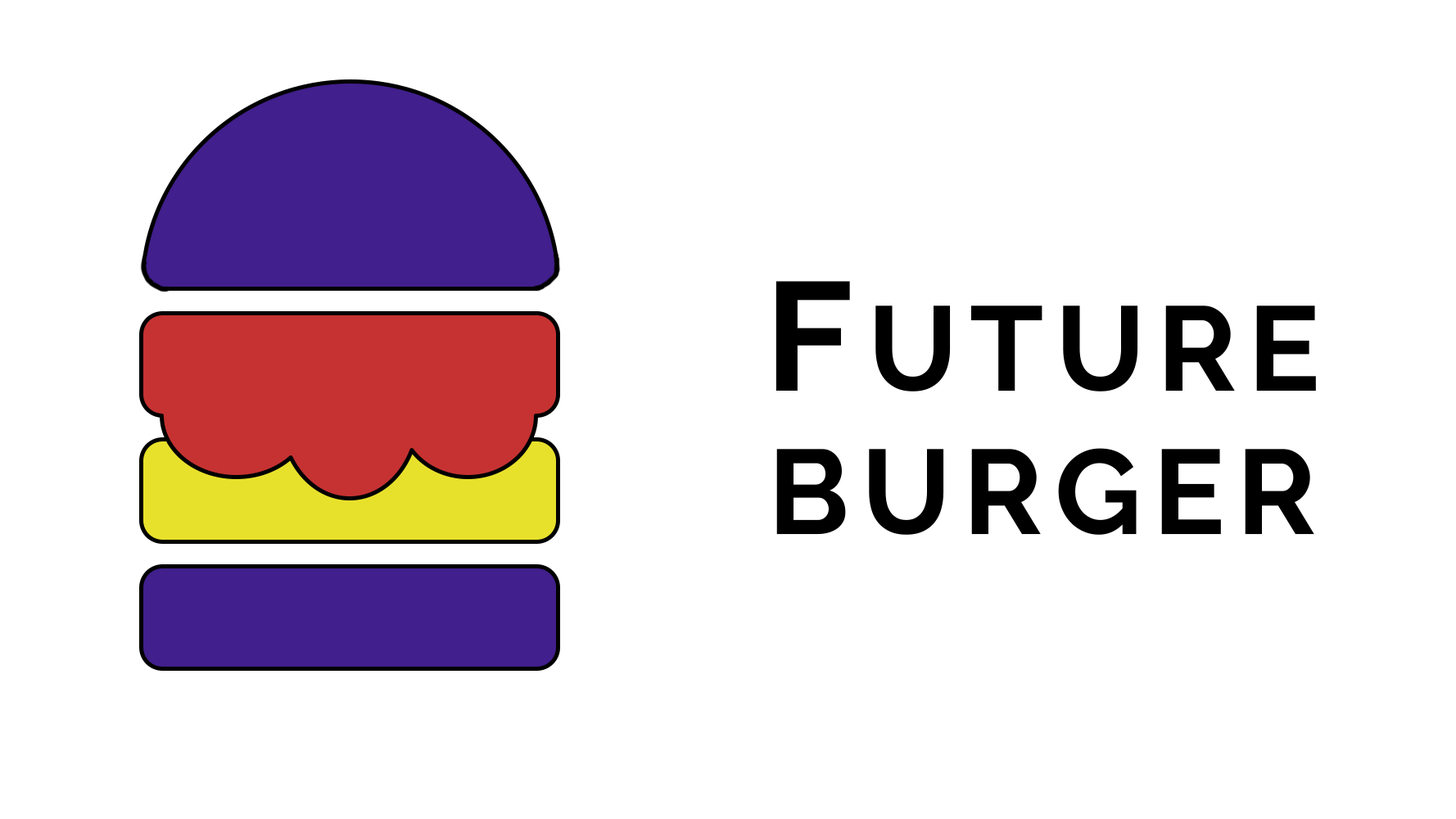
<style>
.page{position:relative;width:1456px;height:819px;background:#ffffff}
.page>*{position:absolute;margin:0}
.t1{font:119.4px "Raleway-Bold";letter-spacing:0.1em;color:#000000;text-transform:uppercase}
.t2{font:153.6px "Raleway-Bold";letter-spacing:0.1em;color:#000000;text-transform:uppercase}
</style>
<div class="page">
<p class="t1" style="left:776px;top:281px;width:540px;height:254px;text-align:center"><span class="t2">F</span>uture<br>Burger</p>
</div>
